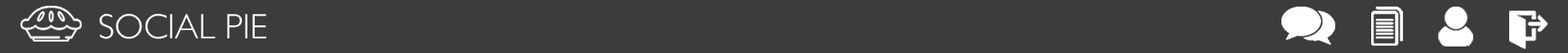
<style>
.page{position:relative;width:1568px;height:53px;background:#3c3c3c}
.page>*{position:absolute;margin:0}
.t1{font:35.3px "GillSans-Light";color:#ffffff}
</style>
<div class="page">
<p class="t1" style="left:99px;top:13px;width:168px;height:26px">SOCIAL PIE</p>
</div>
